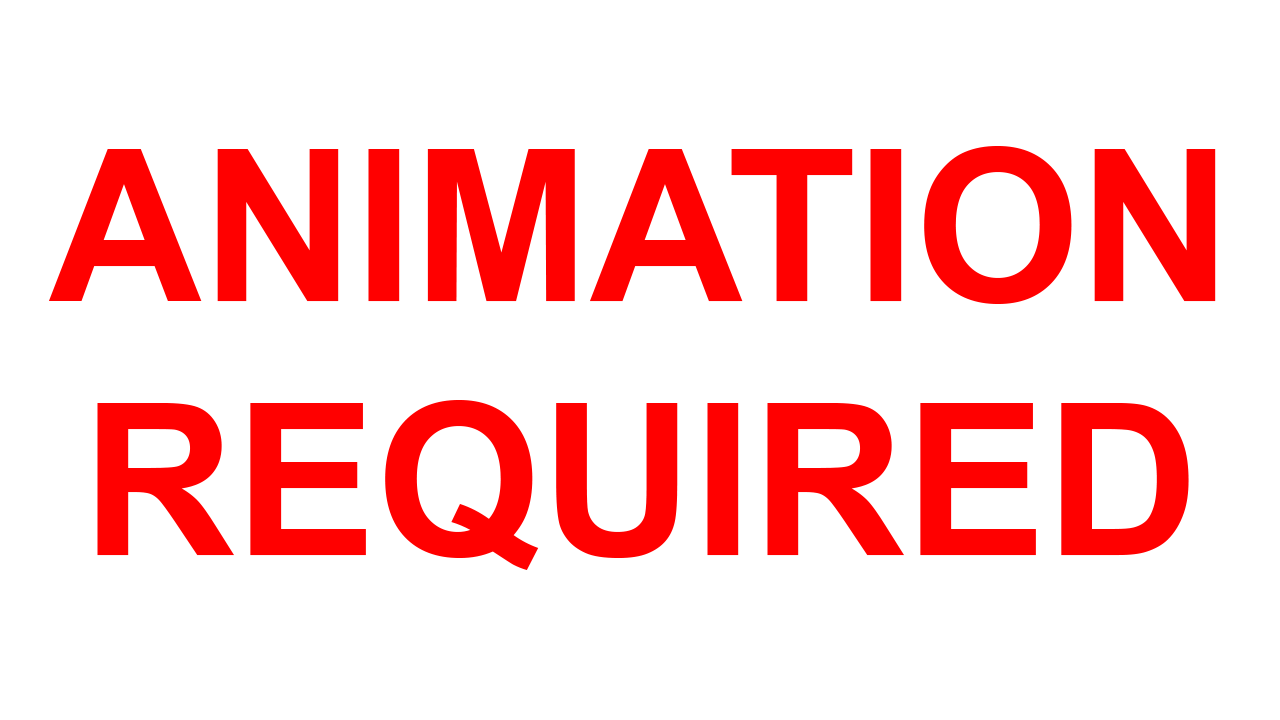
<style>
.page{position:relative;width:1280px;height:720px;background:#ffffff}
.page>*{position:absolute;margin:0}
.t1{font:211.7px "Arial-BoldMT";color:#ff0000}
</style>
<div class="page">
<p class="t1" style="left:48px;top:146px;width:1168px;height:424px;text-align:center">ANIMATION REQUIRED</p>
</div>
